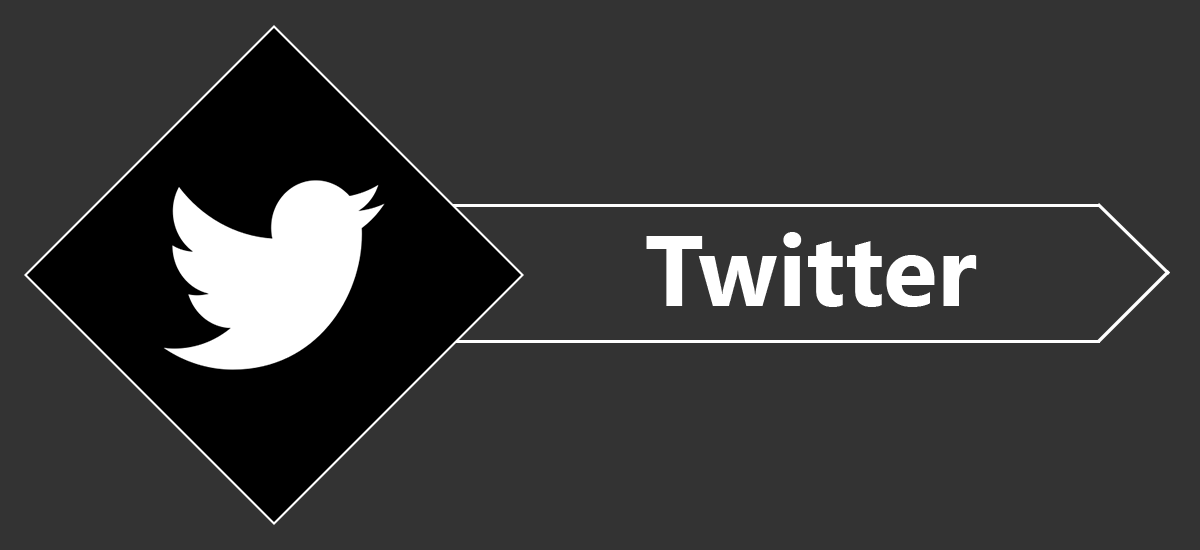
<style>
.page{position:relative;width:1200px;height:550px;background:#333333}
.page>*{position:absolute;margin:0}
.t1{font:100px "KhmerUI-Bold";color:#ffffff}
</style>
<div class="page">
<p class="t1" style="left:646px;top:232px;width:331px;height:75px">Twitter</p>
</div>
